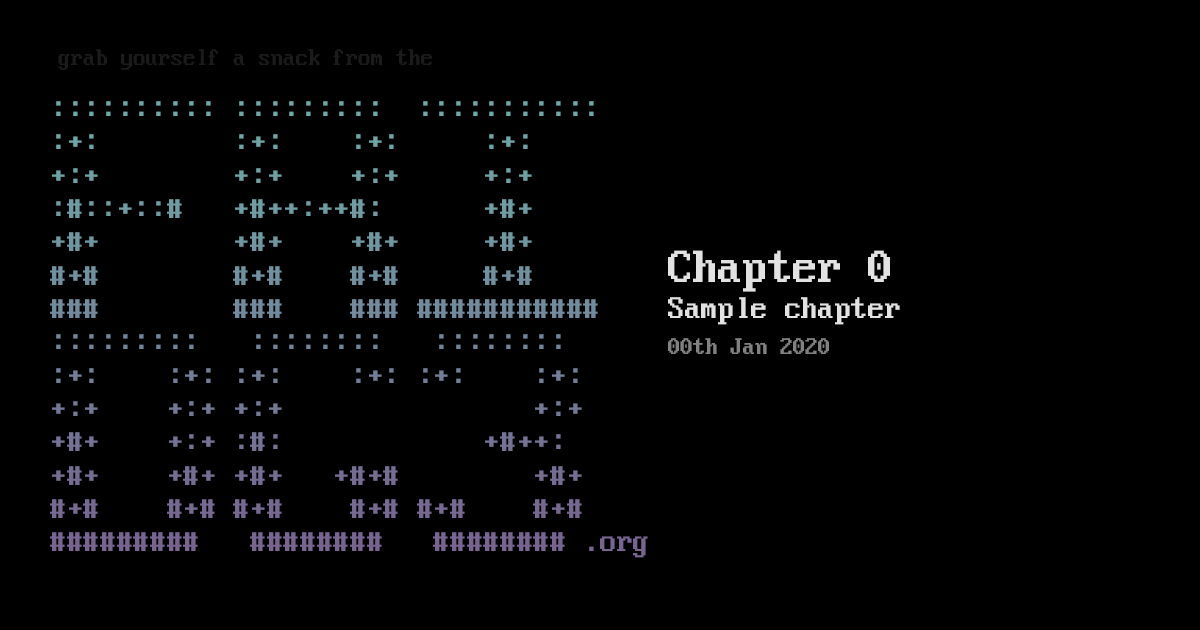
<style>
.page{position:relative;width:1200px;height:630px;background:#000000}
.page>*{position:absolute;margin:0}
.t1{font:25px "Mx437_IBM_VGA_8x16";color:#1b1b1b}
.t2{font:33.3px/33.3px "Mx437_IBM_VGA_8x16"}
.t3{font:33.3px/36.1px "Mx437_IBM_VGA_8x16";color:#e2e2e2}
.t4{font:50px/36.1px "Mx437_IBM_VGA_8x16";color:#e2e2e2}
.t5{font:25px/36.1px "Mx437_IBM_VGA_8x16";color:#818181}
</style>
<div class="page">
<p class="t1" style="left:58px;top:49px;width:374px;height:21px">grab yourself a snack from the</p>
<p class="t2" style="left:50px;top:101px;width:598px;height:457px;text-align:center">:::::::::: :::::::::  :::::::::::<br>:+:        :+:    :+:     :+:    <br>+:+        +:+    +:+     +:+    <br>:#::+::#   +#++:++#:      +#+    <br>+#+        +#+    +#+     +#+    <br>#+#        #+#    #+#     #+#    <br>###        ###    ### ###########<br>:::::::::   ::::::::   ::::::::  <br>:+:    :+: :+:    :+: :+:    :+: <br>+:+    +:+ +:+               +:+ <br>+#+    +:+ :#:            +#++:  <br>+#+    +#+ +#+   +#+#        +#+ <br>#+#    #+# #+#    #+# #+#    #+# <br>   #########   ########   ######## .org</p>
<p class="t3" style="left:668px;top:250px;width:232px;height:104px"><span class="t4">Chapter 0<br></span>Sample chapter<br><span class="t5">00th Jan 2020</span></p>
</div>
